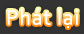
<style>
.page{position:relative;width:84px;height:34px;background:#333333}
.page>*{position:absolute;margin:0}
.t1{font:22px "Corbel";letter-spacing:0.035em;color:#ffffff}
</style>
<div class="page">
<p class="t1" style="left:7px;top:8px;width:71px;height:20px">Phát lại</p>
</div>
